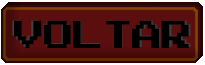
<style>
.page{position:relative;width:205px;height:65px;background:#5b0e0e}
.page>*{position:absolute;margin:0}
.t1{font:30px "PressStartK";letter-spacing:0.01em;color:#000000}
.t2{font:31px "PressStartK";letter-spacing:-0.05em;color:#000000}
</style>
<div class="page">
<p class="t1" style="left:12px;top:20px;width:179px;height:27px">VOLTAR</p>
<p class="t2" style="left:14px;top:20px;width:175px;height:28px">VOLTAR</p>
</div>
